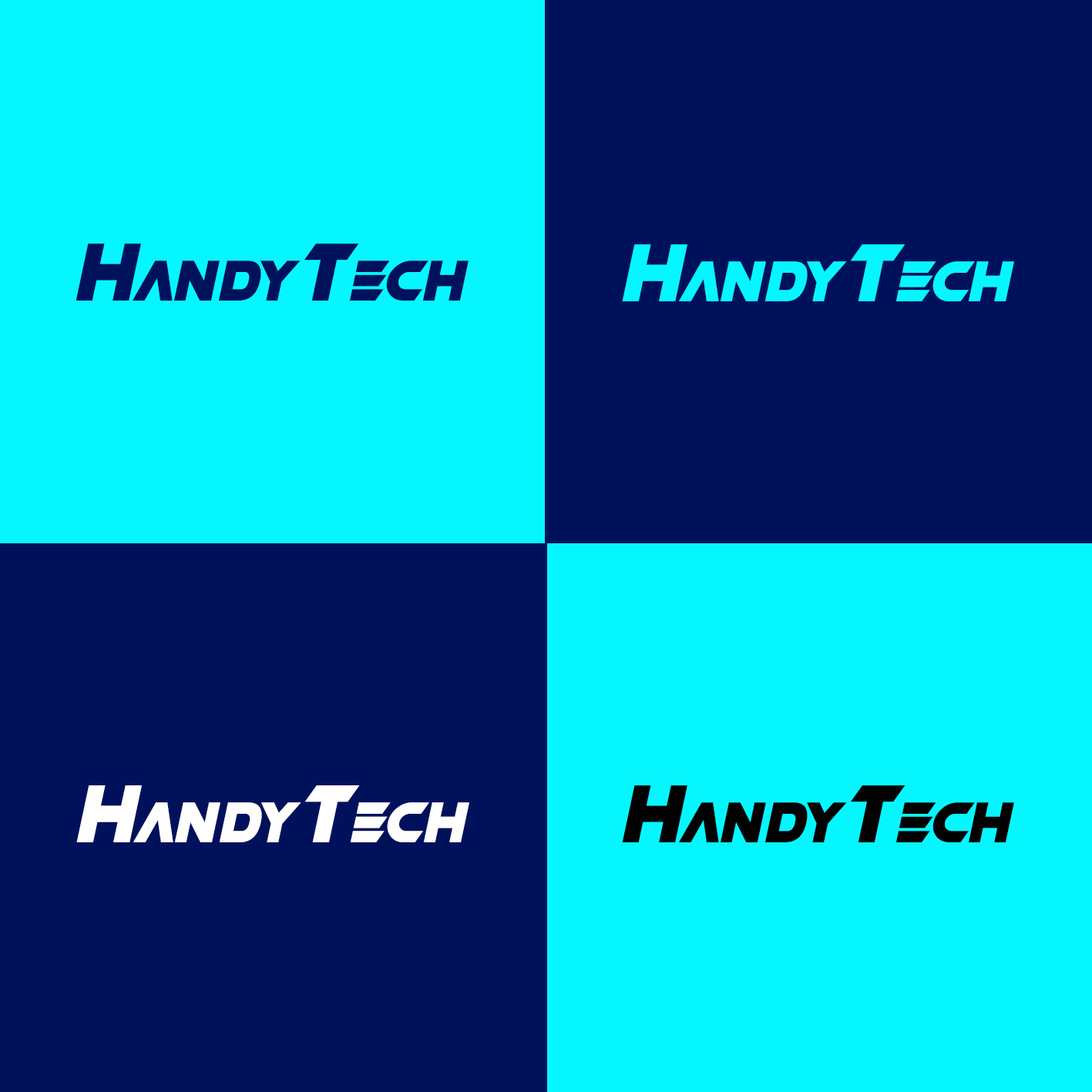
<style>
.page{position:relative;width:1092px;height:1092px;background:#06f6ff}
.page>*{position:absolute;margin:0}
.t1{font:83.5px "SpaceCrusaders-Italic";color:#01125d;font-variant:small-caps}
.t2{font:83.5px "SpaceCrusaders-Italic";color:#01125d;text-transform:uppercase}
.t3{font:83.5px "SpaceCrusaders-Italic";color:#06f6ff;font-variant:small-caps}
.t4{font:83.5px "SpaceCrusaders-Italic";color:#06f6ff;text-transform:uppercase}
.t5{font:83.5px "SpaceCrusaders-Italic";color:#ffffff;font-variant:small-caps}
.t6{font:83.5px "SpaceCrusaders-Italic";color:#ffffff;text-transform:uppercase}
.t7{font:83.5px "SpaceCrusaders-Italic";color:#010101;font-variant:small-caps}
.t8{font:83.5px "SpaceCrusaders-Italic";color:#010101;text-transform:uppercase}
</style>
<div class="page">
<p class="t1" style="left:76px;top:244px;width:393px;height:57px"><span class="t2">h</span>andy<span class="t2">t</span>ech</p>
<p class="t3" style="left:622px;top:244px;width:392px;height:57px"><span class="t4">h</span>andy<span class="t4">t</span>ech</p>
<p class="t5" style="left:76px;top:785px;width:393px;height:57px"><span class="t6">h</span>andy<span class="t6">t</span>ech</p>
<p class="t7" style="left:622px;top:785px;width:392px;height:57px"><span class="t8">h</span>andy<span class="t8">t</span>ech</p>
</div>
